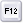
<style>
.page{position:relative;width:23px;height:23px}
.page>*{position:absolute;margin:0}
.t1{font:9px "ArialNarrow";color:#000000}
</style>
<div class="page">
<p class="t1" style="left:5px;top:8px;width:12px;height:6px">F12</p>
</div>
